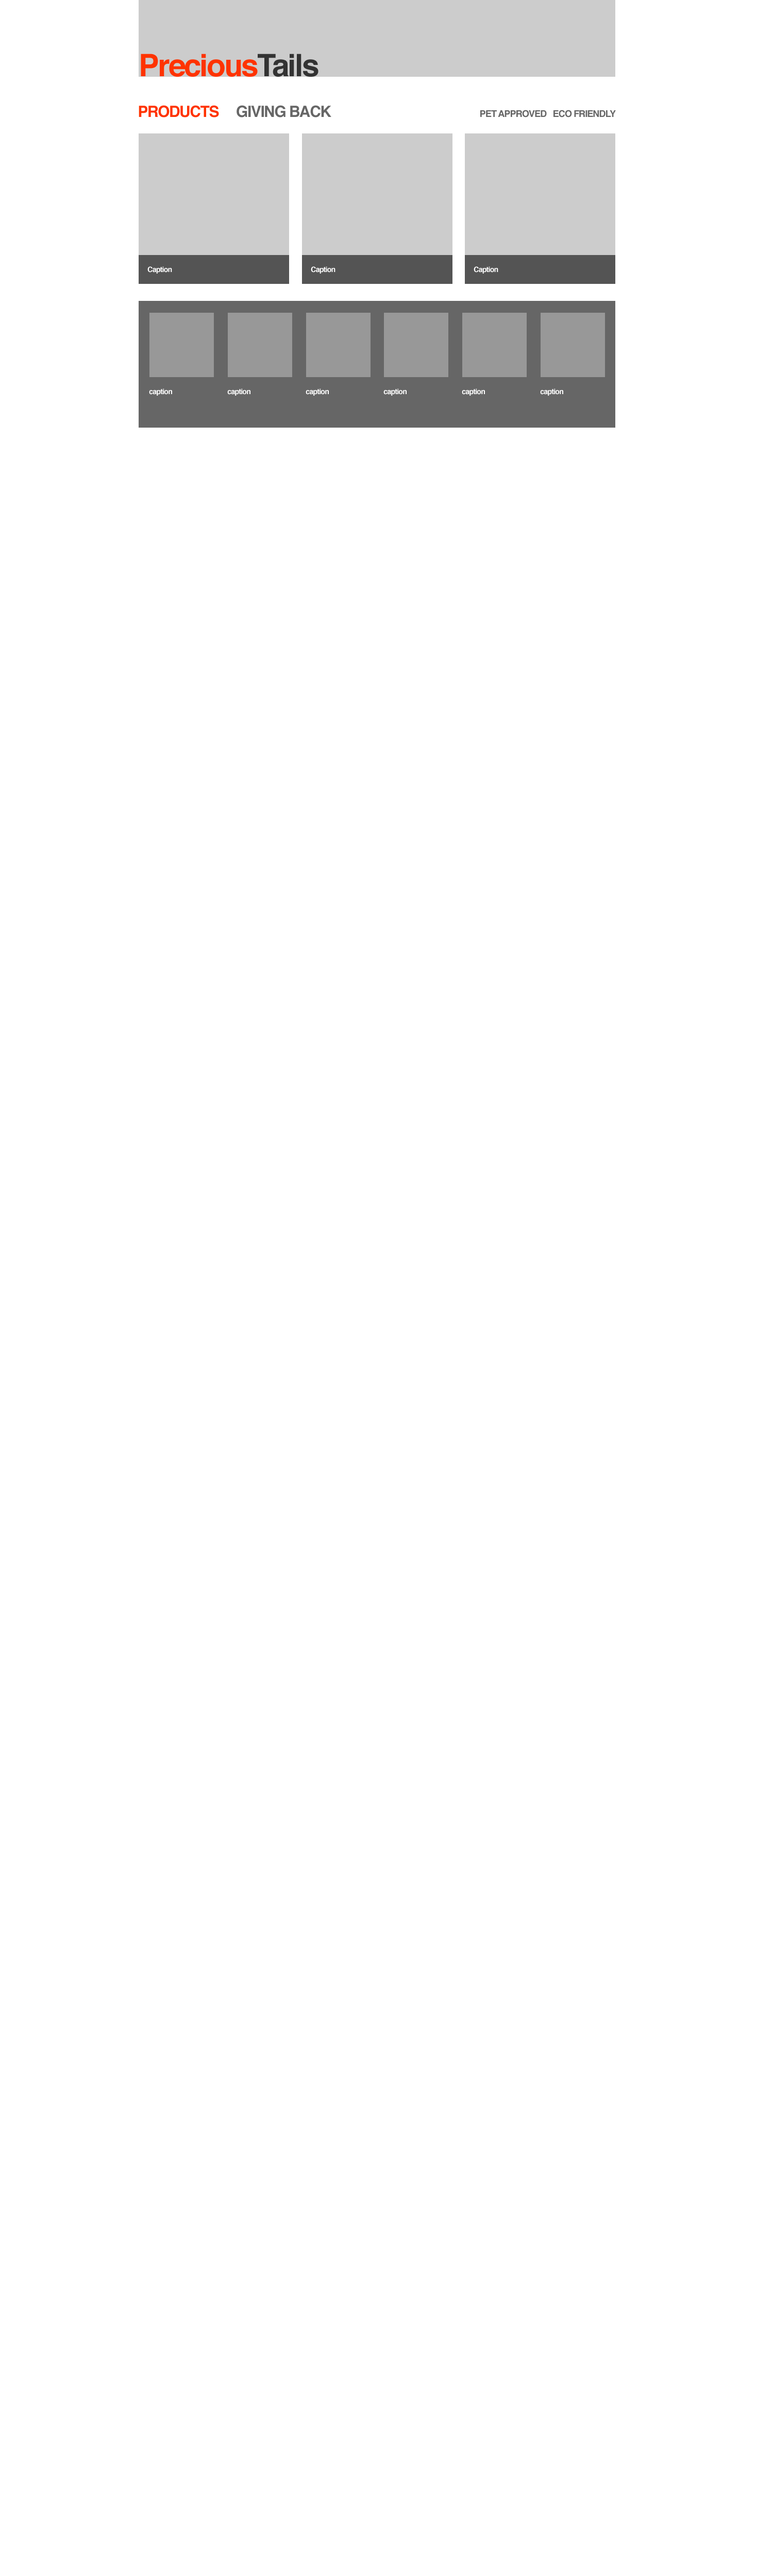
<style>
.page{position:relative;width:773px;height:2576px;background:#ffffff}
.page>*{position:absolute;margin:0}
.t1{font:30.9px "Helvetica-Bold";letter-spacing:-0.05em;color:#ff3300}
.t2{font:30.9px "Helvetica-Bold";letter-spacing:-0.05em;color:#333333}
.t3{font:15.5px "Helvetica-Bold";letter-spacing:-0.05em;color:#666666}
.t4{font:15.5px "Helvetica-Bold";letter-spacing:-0.05em;color:#ff3300}
.t5{font:9.3px "Helvetica-Bold";letter-spacing:-0.05em;color:#666666}
.t6{font:7.2px "Helvetica-Bold";letter-spacing:-0.05em;color:#ffffff}
</style>
<div class="page">
<p class="t1" style="left:141px;top:54px;width:177px;height:23px">Precious<span class="t2">Tails</span></p>
<p class="t3" style="left:139px;top:105px;width:192px;height:12px"><span class="t4">PRODUCTS     </span>GIVING BACK</p>
<p class="t5" style="left:480px;top:110px;width:136px;height:7px">PET APPROVED   ECO FRIENDLY</p>
<p class="t6" style="left:147px;top:266px;width:25px;height:8px">Caption</p>
<p class="t6" style="left:311px;top:266px;width:24px;height:8px">Caption</p>
<p class="t6" style="left:473px;top:266px;width:25px;height:8px">Caption</p>
<p class="t6" style="left:149px;top:388px;width:23px;height:8px">caption</p>
<p class="t6" style="left:227px;top:388px;width:23px;height:8px">caption</p>
<p class="t6" style="left:306px;top:388px;width:23px;height:8px">caption</p>
<p class="t6" style="left:383px;top:388px;width:23px;height:8px">caption</p>
<p class="t6" style="left:462px;top:388px;width:23px;height:8px">caption</p>
<p class="t6" style="left:540px;top:388px;width:23px;height:8px">caption</p>
</div>
